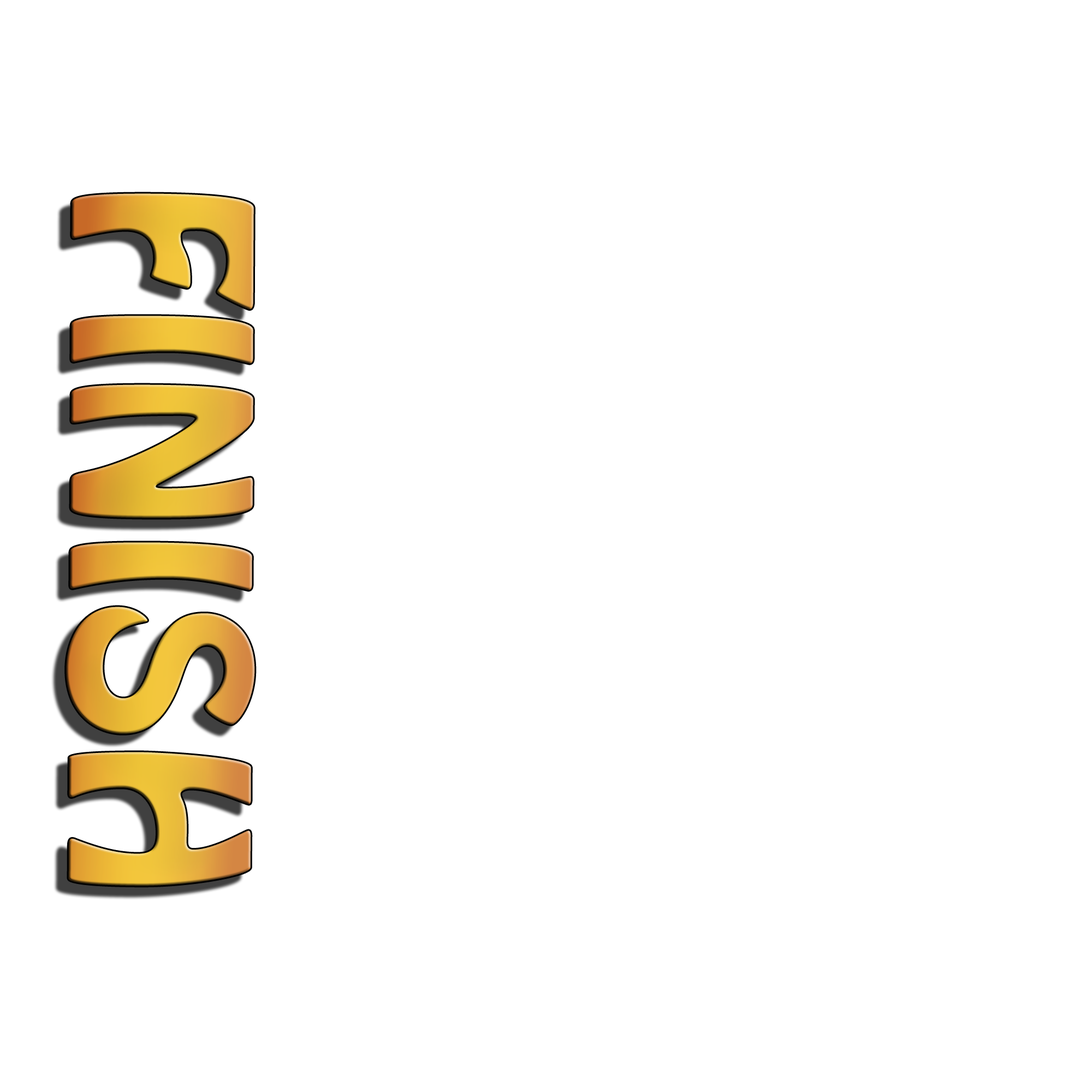
<style>
.page{position:relative;width:1092px;height:1092px;background:#ffffff}
.page>*{position:absolute;margin:0}
.t1{font:218.4px "HoboStd"}
</style>
<div class="page">
<p class="t1" style="left:66px;top:193px;width:189px;height:693px;rotate:90deg">FINISH</p>
</div>
